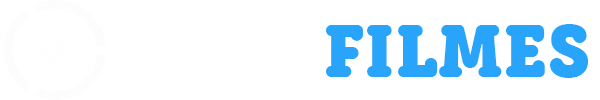
<style>
.page{position:relative;width:600px;height:100px;background:#ffffff}
.page>*{position:absolute;margin:0}
.t1{font:70px "eacologica-round_slab";color:#28a4fb}
</style>
<div class="page">
<p class="t1" style="left:326px;top:24px;width:262px;height:54px">FILMES</p>
</div>
